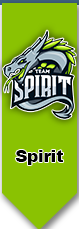
<style>
.page{position:relative;width:79px;height:229px;background:#8ac202}
.page>*{position:absolute;margin:0}
.t1{font:16.7px "Arial-Black";letter-spacing:-0.01em;color:#000000}
</style>
<div class="page">
<p class="t1" style="left:15px;top:150px;width:49px;height:15px">Spirit</p>
</div>
